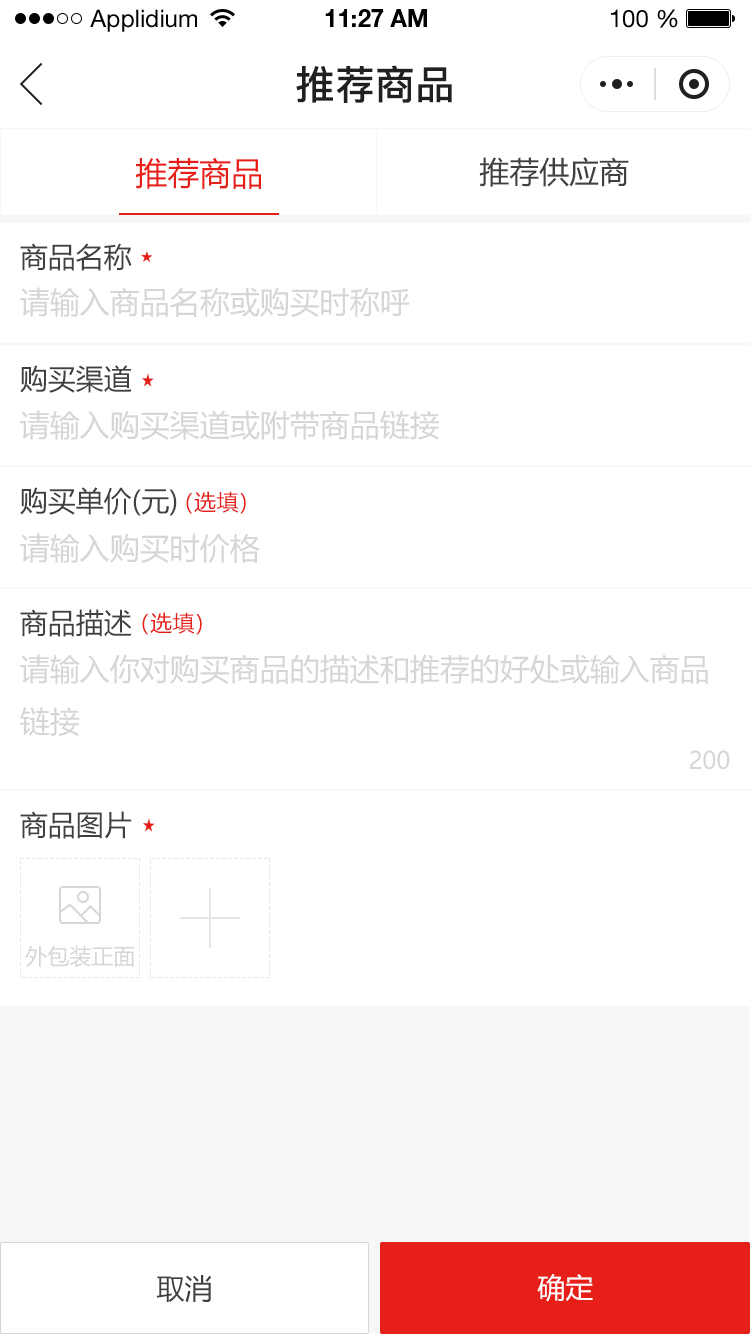
<style>
.page{position:relative;width:750px;height:1334px;background:#ffffff}
.page>*{position:absolute;margin:0}
.t1{font:24px "HelveticaNeueLTStd-Roman";color:#000000}
.t2{font:24px "HelveticaNeueLTStd-Bd";color:#000000}
.t3{font:40px "PingFang-SC-Bold";color:#202020;text-transform:uppercase}
.t4{font:32px "MicrosoftYaHei";color:#e61f18;text-transform:uppercase}
.t5{font:30px "MicrosoftYaHei";color:#404040;text-transform:uppercase}
.t6{font:28px "MicrosoftYaHei";color:#404040;text-transform:uppercase}
.t7{font:30px "MicrosoftYaHei";color:#d6d6d6;text-transform:uppercase}
.t8{font:22px "MicrosoftYaHei";color:#e61f18;text-transform:uppercase}
.t9{font:24px "MicrosoftYaHei";color:#d6d6d6;text-transform:uppercase}
.t10{font:22px "MicrosoftYaHei";color:#d6d6d6;text-transform:uppercase}
.t11{font:28px "MicrosoftYaHei";color:#ffffff;text-transform:uppercase}
</style>
<div class="page">
<p class="t1" style="left:90px;top:9px;width:107px;height:23px">Applidium</p>
<p class="t2" style="left:325px;top:9px;width:102px;height:18px">11:27 AM</p>
<p class="t1" style="left:611px;top:9px;width:67px;height:19px">100 %</p>
<p class="t3" style="left:296px;top:65px;width:156px;height:38px">推荐商品</p>
<p class="t4" style="left:135px;top:157px;width:126px;height:32px">推荐商品</p>
<p class="t5" style="left:479px;top:157px;width:150px;height:30px">推荐供应商</p>
<p class="t6" style="left:20px;top:243px;width:112px;height:28px">商品名称</p>
<p class="t7" style="left:20px;top:287px;width:390px;height:30px">请输入商品名称或购买时称呼</p>
<p class="t6" style="left:20px;top:365px;width:112px;height:28px">购买渠道</p>
<p class="t7" style="left:20px;top:410px;width:419px;height:30px">请输入购买渠道或附带商品链接</p>
<p class="t6" style="left:20px;top:487px;width:157px;height:29px">购买单价(元)</p>
<p class="t8" style="left:186px;top:491px;width:60px;height:23px">（选填）</p>
<p class="t7" style="left:20px;top:533px;width:240px;height:30px">请输入购买时价格</p>
<p class="t6" style="left:20px;top:609px;width:112px;height:28px">商品描述</p>
<p class="t8" style="left:142px;top:612px;width:60px;height:23px">（选填）</p>
<p class="t7" style="left:20px;top:654px;width:688px;height:82px">请输入你对购买商品的描述和推荐的好处或输入商品<br>链接</p>
<p class="t9" style="left:690px;top:750px;width:40px;height:20px">200</p>
<p class="t6" style="left:20px;top:811px;width:112px;height:28px">商品图片</p>
<p class="t10" style="left:25px;top:945px;width:110px;height:22px">外包装正面</p>
<p class="t6" style="left:156px;top:1275px;width:56px;height:27px">取消</p>
<p class="t11" style="left:537px;top:1274px;width:56px;height:28px">确定</p>
</div>
